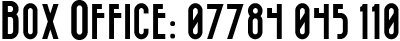
<style>
.page{position:relative;width:400px;height:41px;background:#ffffff}
.page>*{position:absolute;margin:0}
.t1{font:36px "Bazar";color:#000000}
.t2{font:40px "Bazar";color:#000000}
</style>
<div class="page">
<p class="t1" style="left:2px;top:0px;width:397px;height:40px"><span class="t2">B</span>OX <span class="t2">O</span>FFICE: 07784 045 110</p>
</div>
